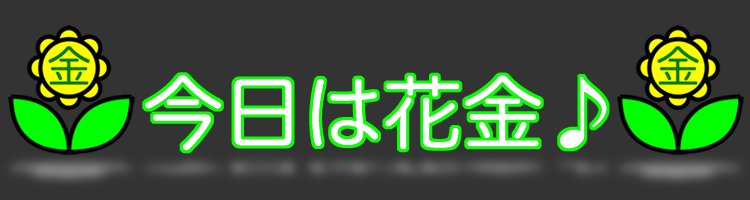
<style>
.page{position:relative;width:750px;height:200px;background:#333333}
.page>*{position:absolute;margin:0}
.t1{font:80px "HiraMaruPro-W4";color:#ffffff}
</style>
<div class="page">
<p class="t1" style="left:145px;top:75px;width:462px;height:76px">今日は花金♪</p>
</div>
